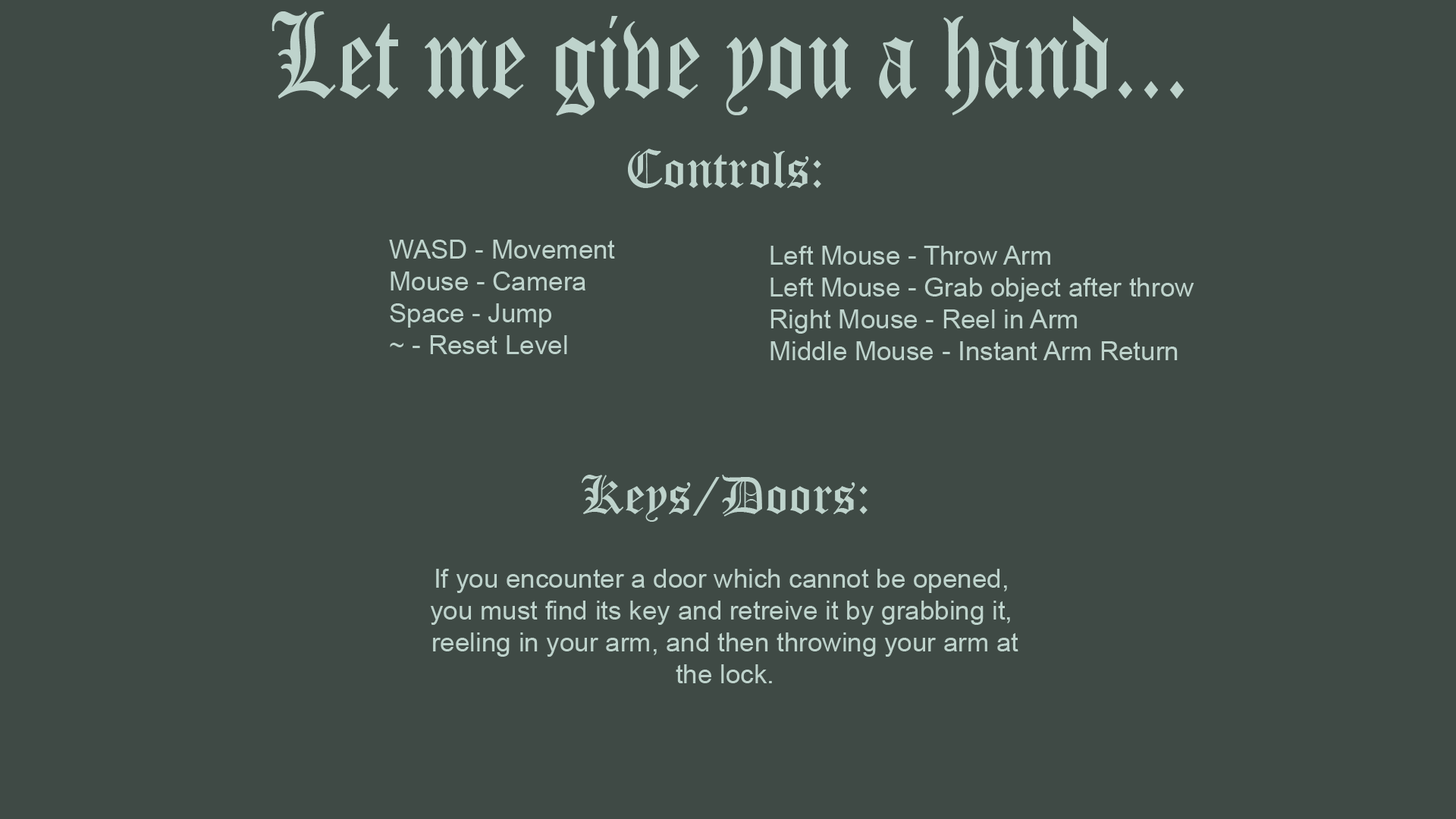
<style>
.page{position:relative;width:1456px;height:819px;background:#3f4a45}
.page>*{position:absolute;margin:0}
.t1{font:118.6px "OldEnglishTextMT";color:#bed3cc;scale:0.78 1}
.t2{font:52.3px "OldEnglishTextMT";color:#bed3cc}
.t3{font:26.5px "ArialMT";color:#bed3cc}
</style>
<div class="page">
<p class="t1" style="left:271px;top:11px;width:913px;height:105px">Let me give you a hand...</p>
<p class="t2" style="left:628px;top:149px;width:193px;height:39px">Controls:</p>
<p class="t3" style="left:389px;top:240px;width:226px;height:114px">WASD - Movement<br>Mouse - Camera<br>Space - Jump<br>~ - Reset Level</p>
<p class="t3" style="left:770px;top:246px;width:424px;height:114px">Left Mouse - Throw Arm<br>Left Mouse - Grab object after throw<br>Right Mouse - Reel in Arm<br>Middle Mouse - Instant Arm Return</p>
<p class="t2" style="left:582px;top:475px;width:286px;height:47px">Keys/Doors:</p>
<p class="t3" style="left:430px;top:569px;width:588px;height:114px;text-align:center">If you encounter a door which cannot be opened,<br>you must find its key and retreive it by grabbing it,<br> reeling in your arm, and then throwing your arm at<br> the lock.</p>
</div>
